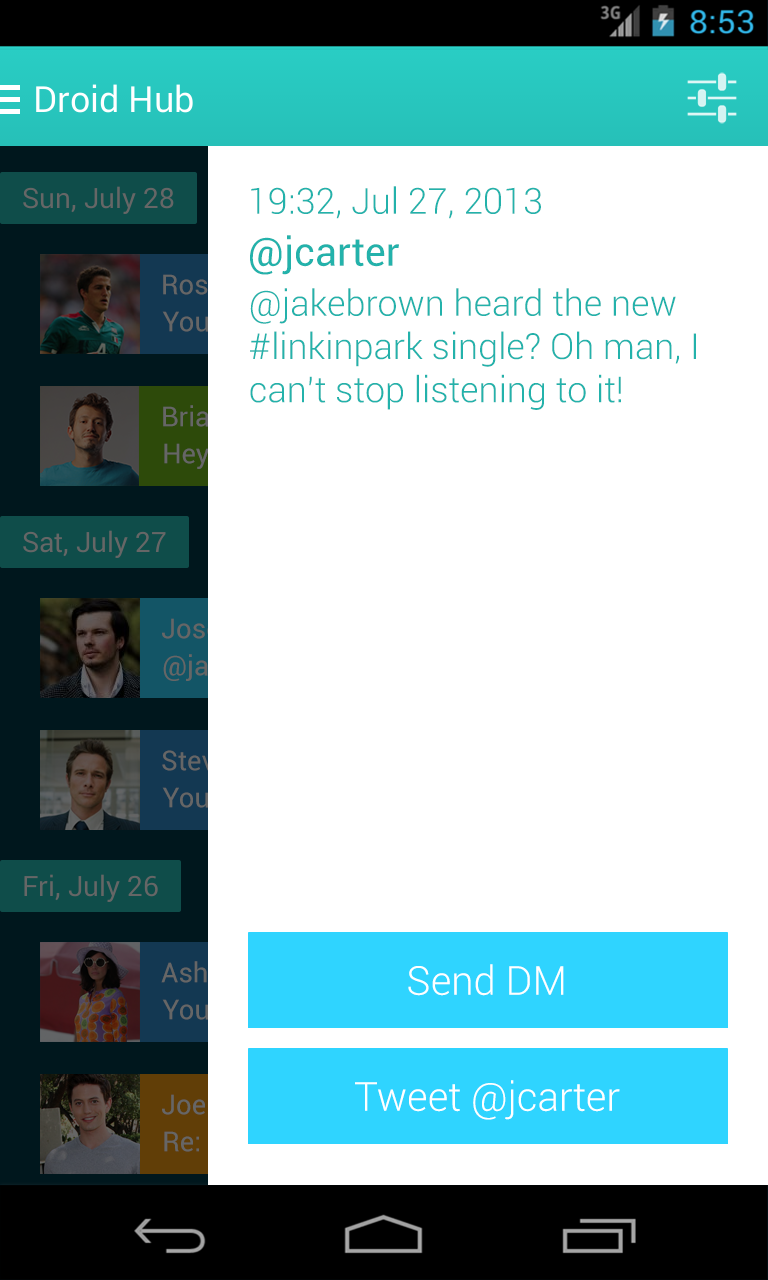
<style>
.page{position:relative;width:768px;height:1280px;background:#ffffff}
.page>*{position:absolute;margin:0}
.t1{font:36px "Roboto-Light";color:#23b2ab}
.t2{font:40px "Roboto-Regular";color:#23b2ab}
.t3{font:40px "Roboto-Light";color:#ffffff}
</style>
<div class="page">
<p class="t1" style="left:251px;top:186px;width:290px;height:33px">19:32, Jul 27, 2013</p>
<p class="t2" style="left:250px;top:235px;width:149px;height:40px">@jcarter</p>
<p class="t1" style="left:250px;top:288px;width:446px;height:122px">@jakebrown heard the new<br>#linkinpark single? Oh man, I<br>can’t stop listening to it!</p>
<p class="t3" style="left:408px;top:964px;width:156px;height:32px">Send DM</p>
<p class="t3" style="left:355px;top:1080px;width:265px;height:40px">Tweet @jcarter</p>
</div>
